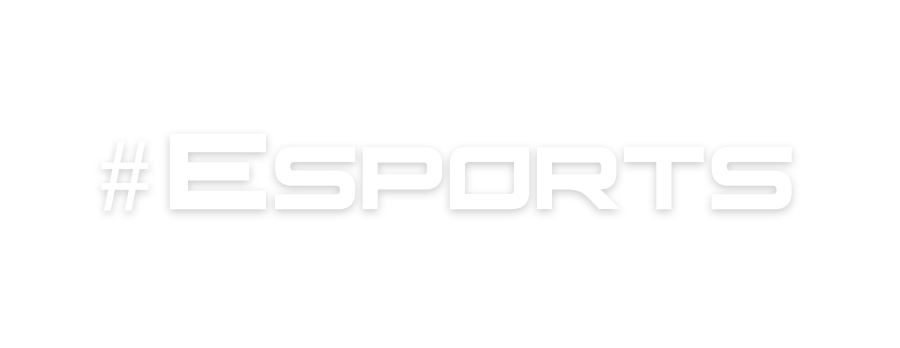
<style>
.page{position:relative;width:900px;height:348px;background:#ffffff}
.page>*{position:absolute;margin:0}
.t1{font:110px "DominatorMedium";letter-spacing:-0.01em;color:#ffffff}
.t2{font:100px "TimesNewRomanPS-BoldMT";letter-spacing:0.2em;color:#ffffff}
.t3{font:133.6px "DominatorMedium";letter-spacing:-0.01em;color:#ffffff}
</style>
<div class="page">
<p class="t1" style="left:101px;top:133px;width:691px;height:78px"><span class="t2">#</span><span class="t3">E</span>SPORTS</p>
</div>
